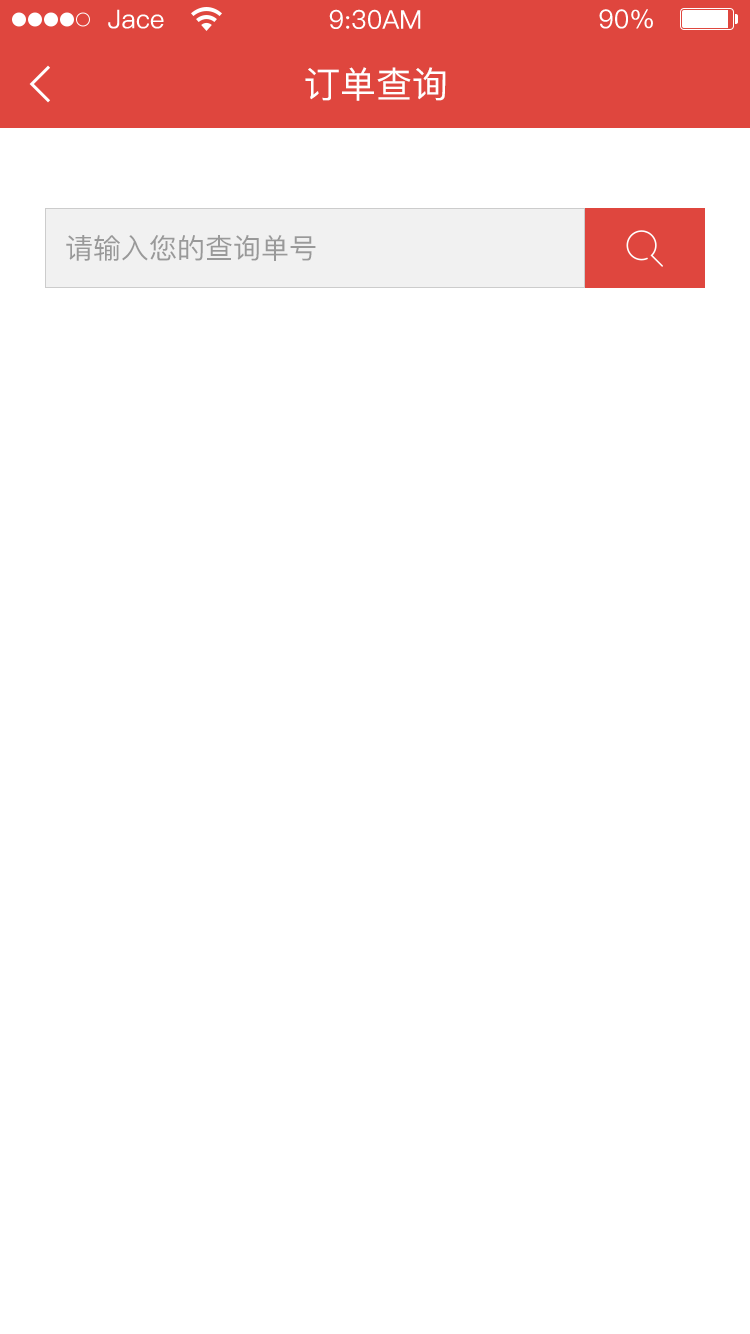
<style>
.page{position:relative;width:750px;height:1334px;background:#ffffff}
.page>*{position:absolute;margin:0}
.t1{font:36px "PingFang-SC-Medium";color:#ffffff}
.t2{font:28px "PingFang-SC-Medium";color:#999999}
</style>
<div class="page">
<p class="t1" style="left:305px;top:67px;width:141px;height:34px">订单查询</p>
<p class="t2" style="left:66px;top:235px;width:250px;height:26px">请输入您的查询单号</p>
</div>
